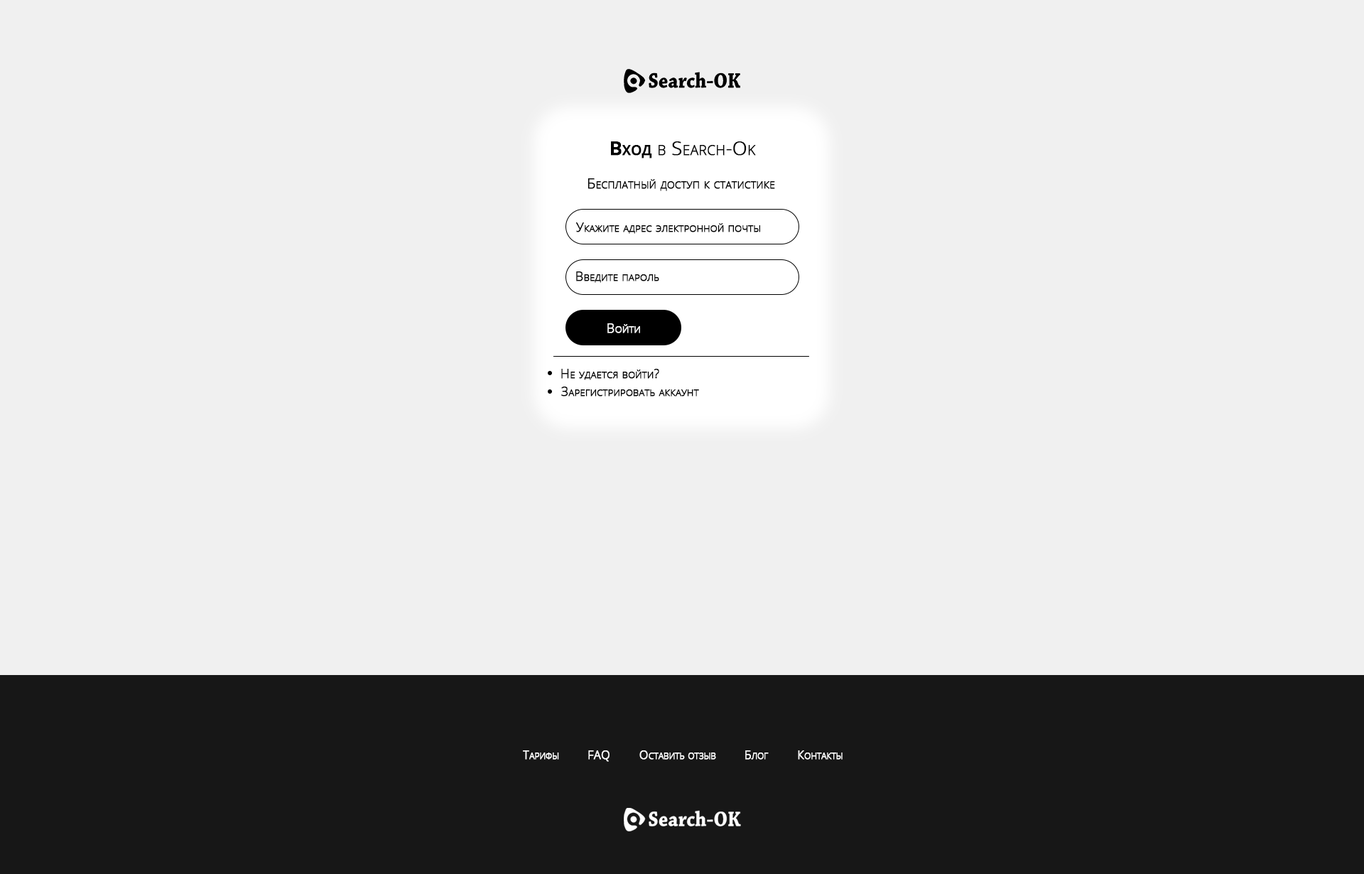
<style>
.page{position:relative;width:1364px;height:874px;background:#f0f0f0}
.page>*{position:absolute;margin:0}
.t1{font:19.1px "OpenSans-Light";color:#000000;font-variant:small-caps;font-weight:bold}
.t2{font:19.1px "OpenSans-SemiBold";color:#000000;font-variant:small-caps;font-weight:bold}
.t3{font:14px "OpenSans-Light";color:#000000;font-variant:small-caps;font-weight:bold}
.t4{font:13px "OpenSans-Light";color:#000000;font-variant:small-caps;font-weight:bold}
.t5{font:13px "OpenSans-Light";color:#ffffff;font-variant:small-caps;font-weight:bold}
.t6{font:11.7px "OpenSans-Light";color:#ffffff;font-variant:small-caps;font-weight:bold}
</style>
<div class="page">
<p class="t1" style="left:611px;top:141px;width:145px;height:17px"><span class="t2">Вход </span>в Search-Ok</p>
<p class="t3" style="left:588px;top:178px;width:187px;height:13px">Бесплатный доступ к статистике</p>
<p class="t4" style="left:576px;top:222px;width:184px;height:12px">Укажите адрес электронной почты</p>
<p class="t4" style="left:576px;top:271px;width:83px;height:12px">Введите пароль</p>
<p class="t5" style="left:608px;top:323px;width:32px;height:10px">Войти</p>
<p class="t4" style="left:561px;top:369px;width:98px;height:11px">Не удается войти?</p>
<p class="t4" style="left:561px;top:387px;width:138px;height:10px">Зарегистрировать аккаунт</p>
<p class="t6" style="left:523px;top:750px;width:36px;height:10px">Тарифы</p>
<p class="t6" style="left:588px;top:750px;width:22px;height:12px">FAQ</p>
<p class="t6" style="left:640px;top:750px;width:76px;height:10px">Оставить отзыв</p>
<p class="t6" style="left:745px;top:750px;width:24px;height:10px">Блог</p>
<p class="t6" style="left:798px;top:750px;width:45px;height:10px">Контакты</p>
</div>
